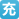
<style>
.page{position:relative;width:19px;height:19px}
.page>*{position:absolute;margin:0}
.t1{font:14px "MicrosoftYaHei-Bold";color:#ffffff;text-transform:uppercase}
</style>
<div class="page">
<p class="t1" style="left:2px;top:2px;width:14px;height:14px">充</p>
</div>
